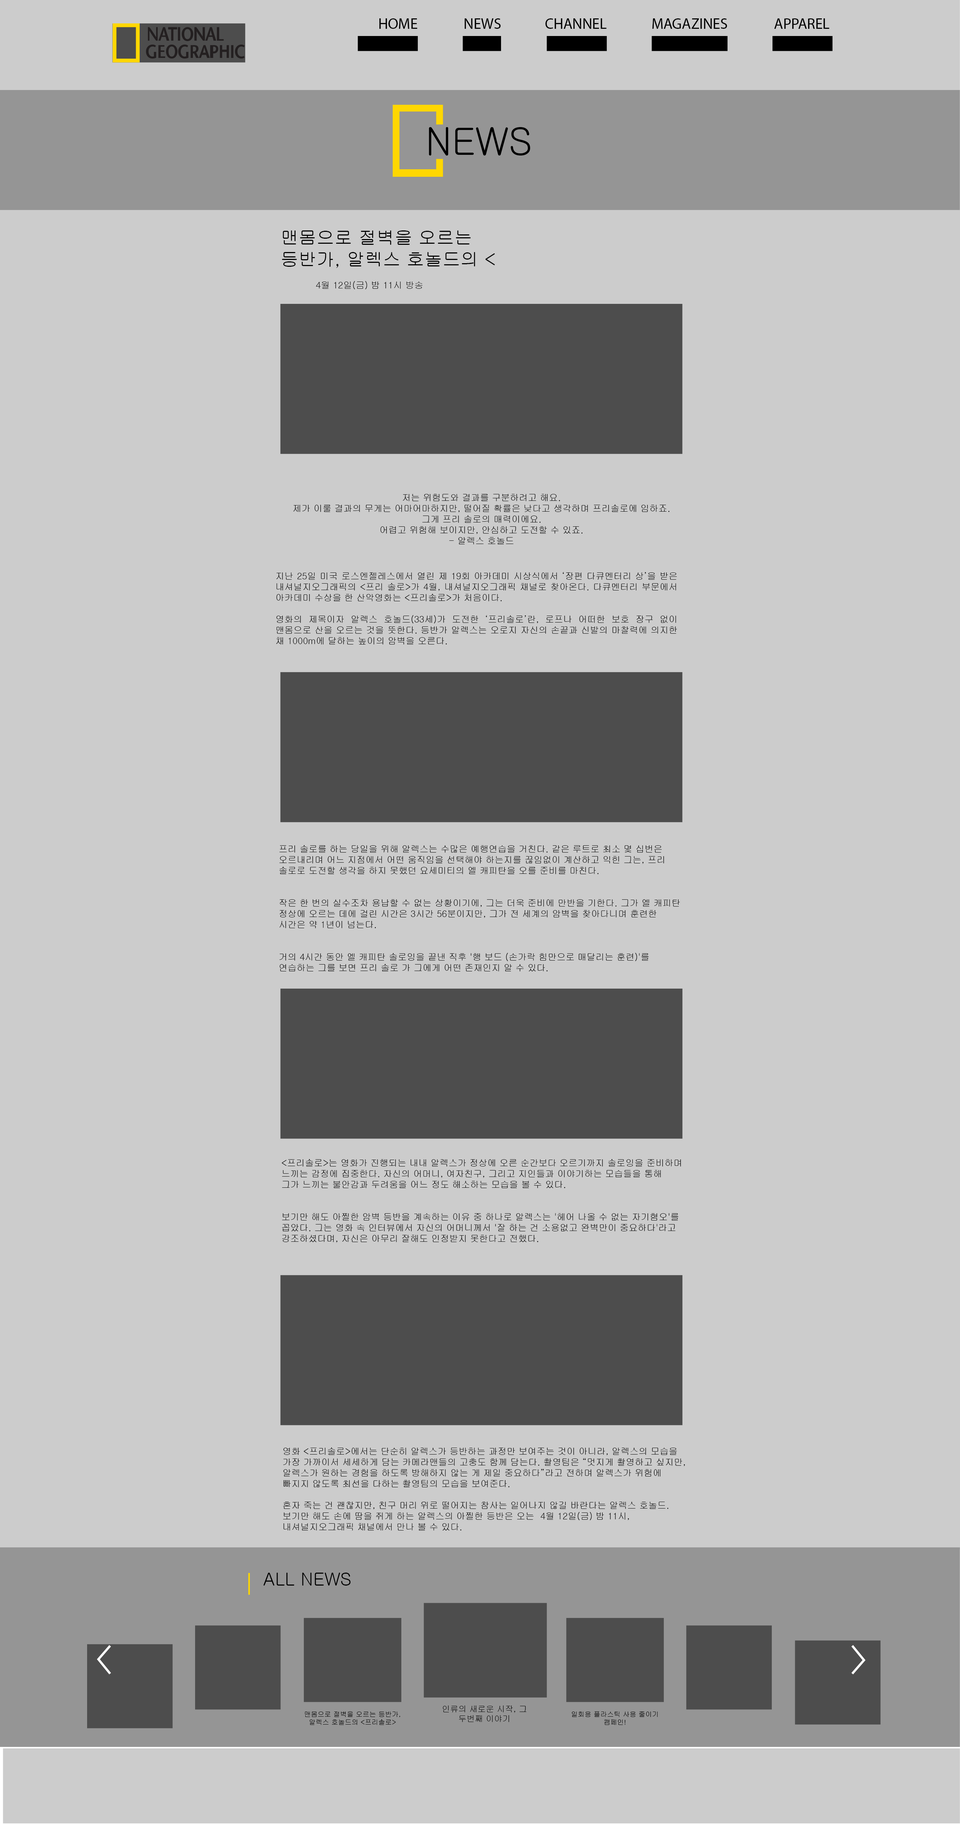
<style>
.page{position:relative;width:960px;height:1825px;background:#cccccc}
.page>*{position:absolute;margin:0}
.t1{font:15px "MyriadPro-Regular";color:#000000}
.t2{font:37.5px "NotoSansKR-Bold";color:#000000}
.t3{font:18px "NotoSansKR-Bold";color:#000000}
.t4{font:9px "NotoSansKR-Regular";color:#000000}
.t5{font:8.2px "NotoSansKR-Regular";color:#000000}
.t6{font:6.8px "NotoSansKR-Regular";color:#000000}
</style>
<div class="page">
<p class="t1" style="left:379px;top:18px;width:38px;height:11px">HOME</p>
<p class="t1" style="left:465px;top:18px;width:36px;height:11px">NEWS</p>
<p class="t1" style="left:545px;top:18px;width:62px;height:11px">CHANNEL</p>
<p class="t1" style="left:652px;top:18px;width:75px;height:11px">MAGAZINES</p>
<p class="t1" style="left:774px;top:18px;width:55px;height:11px">APPAREL</p>
<p class="t2" style="left:429px;top:127px;width:101px;height:29px">NEWS</p>
<p class="t3" style="left:282px;top:230px;width:213px;height:38px">맨몸으로 절벽을 오르는 등반가, 알렉스 호놀드의 &lt;프리솔로&gt;</p>
<p class="t4" style="left:316px;top:281px;width:107px;height:8px">4월 12일(금) 밤 11시 방송</p>
<p class="t4" style="left:293px;top:494px;width:377px;height:50px;text-align:center">저는 위험도와 결과를 구분하려고 해요. <br>제가 이룰 결과의 무게는 어마어마하지만, 떨어질 확률은 낮다고 생각하며 프리솔로에 임하죠.<br>그게 프리 솔로의 매력이에요.<br>어렵고 위험해 보이지만, 안심하고 도전할 수 있죠. <br>- 알렉스 호놀드</p>
<p class="t4" style="left:276px;top:572px;width:401px;height:72px;text-align:justify">지난 25일 미국 로스엔젤레스에서 열린 제 19회 아카데미 시상식에서 ‘장편 다큐멘터리 상’을 받은 내셔널지오그래픽의 &lt;프리 솔로&gt;가 4월, 내셔널지오그래픽 채널로 찾아온다. 다큐멘터리 부문에서 아카데미 수상을 한 산악영화는 &lt;프리솔로&gt;가 처음이다.<br><br>영화의 제목이자 알렉스 호놀드(33세)가 도전한 ‘프리솔로’란, 로프나 어떠한 보호 장구 없이 맨몸으로 산을 오르는 것을 뜻한다. 등반가 알렉스는 오로지 자신의 손끝과 신발의 마찰력에 의지한 채 1000m에 달하는 높이의 암벽을 오른다.</p>
<p class="t4" style="left:279px;top:845px;width:401px;height:126px">프리 솔로를 하는 당일을 위해 알렉스는 수많은 예행연습을 거친다. 같은 루트로 최소 몇 십번은 오르내리며 어느 지점에서 어떤 움직임을 선택해야 하는지를 끊임없이 계산하고 익힌 그는, 프리 솔로로 도전할 생각을 하지 못했던 요세미티의 엘 캐피탄을 오를 준비를 마친다. <br><br><br>작은 한 번의 실수조차 용납할 수 없는 상황이기에, 그는 더욱 준비에 만반을 기한다. 그가 엘 캐피탄 정상에 오르는 데에 걸린 시간은 3시간 56분이지만, 그가 전 세계의 암벽을 찾아다니며 훈련한 시간은 약 1년이 넘는다. <br><br><br>거의 4시간 동안 엘 캐피탄 솔로잉을 끝낸 직후 '행 보드 (손가락 힘만으로 매달리는 훈련)'를 연습하는 그를 보면 프리 솔로 가 그에게 어떤 존재인지 알 수 있다.</p>
<p class="t4" style="left:282px;top:1159px;width:399px;height:84px">&lt;프리솔로&gt;는 영화가 진행되는 내내 알렉스가 정상에 오른 순간보다 오르기까지 솔로잉을 준비하며 느끼는 감정에 집중한다. 자신의 어머니, 여자친구, 그리고 지인들과 이야기하는 모습들을 통해 그가 느끼는 불안감과 두려움을 어느 정도 해소하는 모습을 볼 수 있다.<br><br><br>보기만 해도 아찔한 암벽 등반을 계속하는 이유 중 하나로 알렉스는 '헤어 나올 수 없는 자기혐오'를 꼽았다. 그는 영화 속 인터뷰에서 자신의 어머니께서 '잘 하는 건 소용없고 완벽만이 중요하다'라고 강조하셨다며, 자신은 아무리 잘해도 인정받지 못한다고 전했다.</p>
<p class="t4" style="left:283px;top:1447px;width:402px;height:83px">영화 &lt;프리솔로&gt;에서는 단순히 알렉스가 등반하는 과정만 보여주는 것이 아니라, 알렉스의 모습을 가장 가까이서 세세하게 담는 카메라맨들의 고충도 함께 담는다. 촬영팀은 “멋지게 촬영하고 싶지만, 알렉스가 원하는 경험을 하도록 방해하지 않는 게 제일 중요하다”라고 전하며 알렉스가 위험에 빠지지 않도록 최선을 다하는 촬영팀의 모습을 보여준다.<br><br>혼자 죽는 건 괜찮지만, 친구 머리 위로 떨어지는 참사는 일어나지 않길 바란다는 알렉스 호놀드. 보기만 해도 손에 땀을 쥐게 하는 알렉스의 아찔한 등반은 오는  4월 12일(금) 밤 11시, 내셔널지오그래픽 채널에서 만나 볼 수 있다.</p>
<p class="t3" style="left:264px;top:1572px;width:87px;height:13px">ALL NEWS</p>
<p class="t5" style="left:443px;top:1705px;width:84px;height:17px;text-align:center">인류의 새로운 시작, 그 두번째 이야기</p>
<p class="t6" style="left:305px;top:1711px;width:95px;height:14px;text-align:center">맨몸으로 절벽을 오르는 등반가, 알렉스 호놀드의 &lt;프리솔로&gt;</p>
<p class="t6" style="left:572px;top:1711px;width:86px;height:14px;text-align:center">일회용 플라스틱 사용 줄이기 캠페인!</p>
</div>
